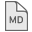
<style>
.page{position:relative;width:32px;height:32px;background:#ffffff}
.page>*{position:absolute;margin:0}
.t1{font:10px "SFCompactDisplay-Regular";letter-spacing:0.025em;color:#5b5b5b}
</style>
<div class="page">
<p class="t1" style="left:9px;top:16px;width:14px;height:8px">MD</p>
</div>
